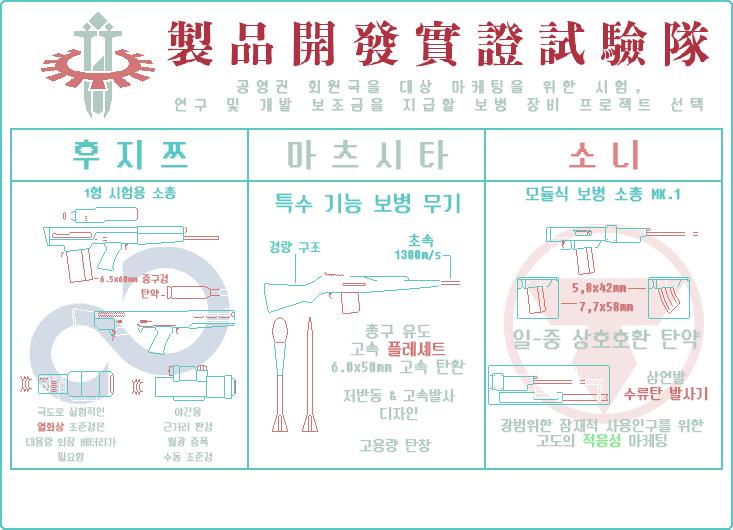
<style>
.page{position:relative;width:733px;height:530px;background:#ffffff}
.page>*{position:absolute;margin:0}
.t1{font:15px "DungGeunMo";color:#59c7c2;font-weight:bold;scale:0.8 1}
.t2{font:24px "DungGeunMo";color:#59c7c2;font-weight:bold;scale:0.8 1}
.t3{font:18px "DungGeunMo";color:#59c7c2;font-weight:bold;scale:0.8 1}
.t4{font:14px "DungGeunMo";color:#59c7c2;font-weight:bold;scale:0.8 1}
.t5{font:16px/14px "DungGeunMo";color:#59c7c2;font-weight:bold;scale:0.8 1}
.t6{font:11px "DungGeunMo";color:#d17576;font-weight:bold;scale:0.8 1}
.t7{font:16px "DungGeunMo";color:#d17576;font-weight:bold;scale:0.8 1}
.t8{font:18px/18px "DungGeunMo";color:#b2c9c2;font-weight:bold;scale:0.8 1}
.t9{font:18px/18px "DungGeunMo";color:#d17576;font-weight:bold;scale:0.8 1}
.t10{font:24px "DungGeunMo";color:#b2c9c2;font-weight:bold;scale:0.8 1}
.t11{font:16px/16px "DungGeunMo";color:#d17576;font-weight:bold;scale:0.8 1}
.t12{font:16px/16px "DungGeunMo";color:#b2c9c2;font-weight:bold;scale:0.8 1}
.t13{font:16px/18px "DungGeunMo";color:#b2c9c2;font-weight:bold;scale:0.8 1}
.t14{font:11px/15px "DungGeunMo";color:#b2c9c2;font-weight:bold;scale:0.8 1}
.t15{font:11px/15px "DungGeunMo";color:#d17576;font-weight:bold;scale:0.8 1}
.t16{font:16px/15px "DungGeunMo";color:#b2c9c2;font-weight:bold;scale:0.8 1}
.t17{font:16px/15px "DungGeunMo";color:#85ea8e;font-weight:bold;scale:0.8 1}
.t18{font:16px "DungGeunMo";color:#b2c9c2;font-weight:bold;scale:0.8 1}
</style>
<div class="page">
<p class="t1" style="left:84px;top:186px;width:92px;height:13px">1형 시험용 소총</p>
<p class="t2" style="left:275px;top:193px;width:185px;height:21px">특수 기능 보병 무기</p>
<p class="t3" style="left:526px;top:186px;width:154px;height:16px">모듈식 보병 소총 MK.1</p>
<p class="t4" style="left:269px;top:241px;width:52px;height:12px">경량 구조</p>
<p class="t5" style="left:394px;top:234px;width:47px;height:27px;text-align:center">초속<br>1300m/s</p>
<p class="t6" style="left:100px;top:274px;width:68px;height:10px">6.5x60mm 중구경</p>
<p class="t6" style="left:141px;top:289px;width:18px;height:10px">탄약</p>
<p class="t7" style="left:572px;top:283px;width:54px;height:12px">5,8x42mm</p>
<p class="t7" style="left:579px;top:302px;width:54px;height:12px">7,7x58mm</p>
<p class="t8" style="left:331px;top:323px;width:135px;height:52px;text-align:center">총구 유도<br>고속 <span class="t9">플레셰트<br></span>6.0x50mm 고속 탄환</p>
<p class="t10" style="left:513px;top:329px;width:187px;height:21px">일-중 상호호환 탄약</p>
<p class="t11" style="left:624px;top:371px;width:84px;height:30px;text-align:center"><span class="t12">삼연발<br></span>수류탄 발사기</p>
<p class="t13" style="left:343px;top:389px;width:113px;height:32px;text-align:center">저반동 &amp; 고속발사<br>디자인</p>
<p class="t14" style="left:26px;top:407px;width:91px;height:55px;text-align:center">극도로 실험적인<br><span class="t15">열화상 </span>조준경은<br>대용량 외장 배터리가<br>필요함</p>
<p class="t14" style="left:163px;top:407px;width:49px;height:55px;text-align:center">야간용<br>근거리 환경<br>월광 증폭<br>수동 조준경</p>
<p class="t16" style="left:501px;top:419px;width:203px;height:29px;text-align:center">광범위한 잠재적 사용인구를 위한<br>고도의 <span class="t17">적응성</span> 마케팅</p>
<p class="t18" style="left:359px;top:439px;width:73px;height:14px">고용량 탄창</p>
</div>
